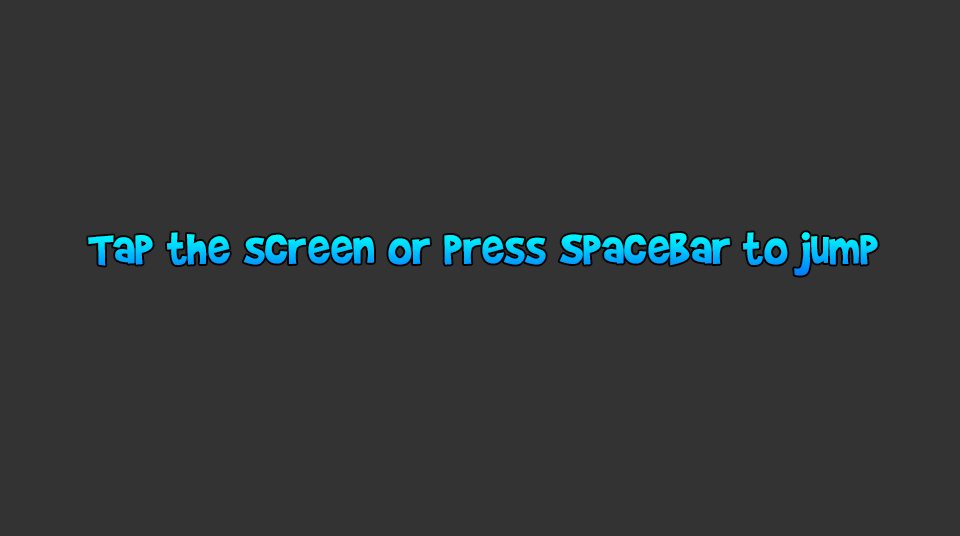
<style>
.page{position:relative;width:960px;height:536px;background:#333333}
.page>*{position:absolute;margin:0}
.t1{font:50.7px "BradyBunchRemastered"}
</style>
<div class="page">
<p class="t1" style="left:88px;top:232px;width:790px;height:44px">Tap the screen or press Spacebar to jump</p>
</div>
